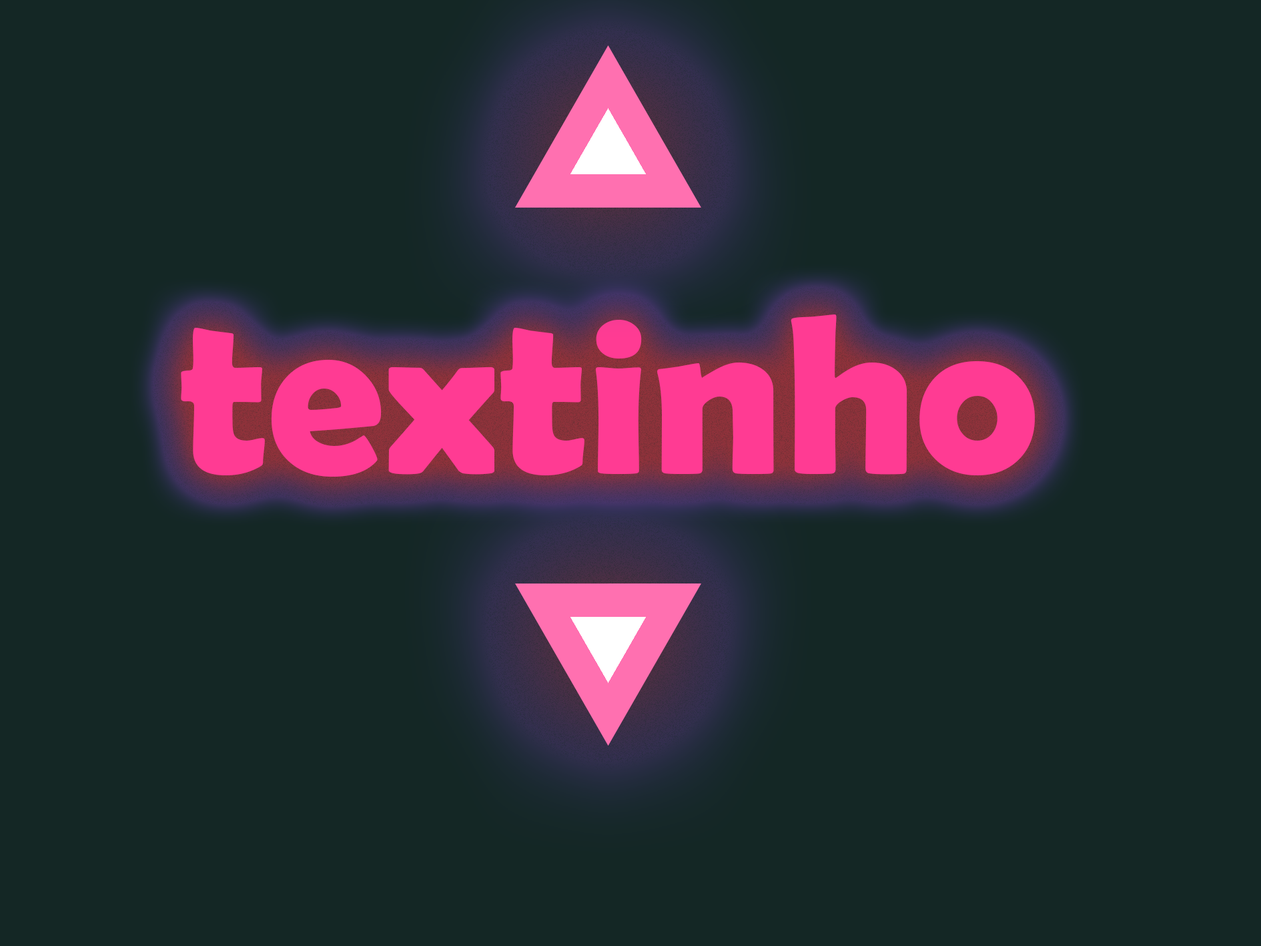
<style>
.page{position:relative;width:1261px;height:946px;background:#142725}
.page>*{position:absolute;margin:0}
.t1{font:228.9px "BerlinSansFBDemi-Bold";color:#ff3b93}
</style>
<div class="page">
<p class="t1" style="left:181px;top:314px;width:854px;height:162px">textinho</p>
</div>
